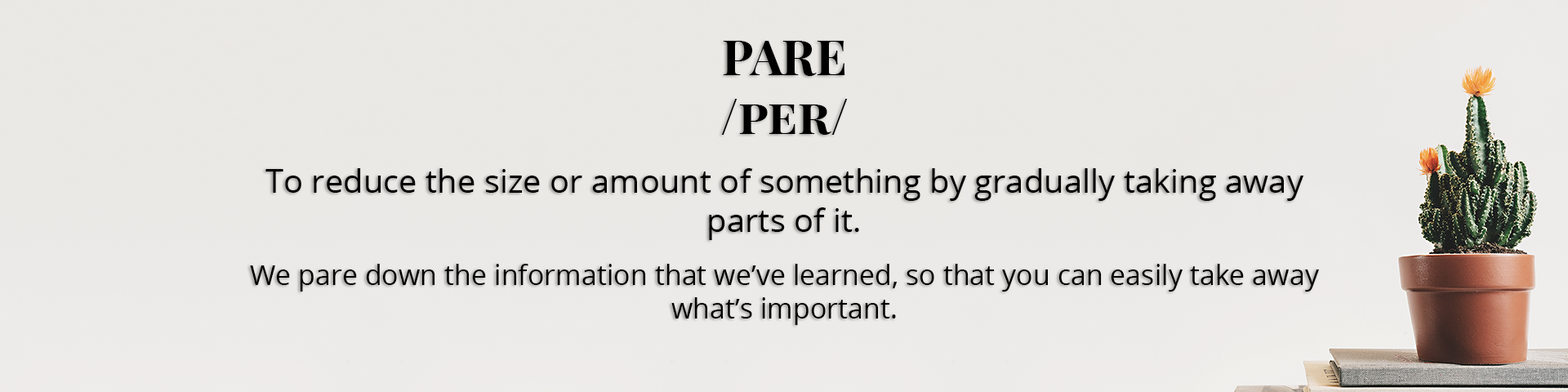
<style>
.page{position:relative;width:1568px;height:392px;background:#eae9e5}
.page>*{position:absolute;margin:0}
.t1{font:27.8px "OpenSans";color:#000000}
.t2{font:49px "PlayfairDisplaySC-Bold";color:#000000}
.t3{font:32.7px "OpenSans";color:#000000}
</style>
<div class="page">
<p class="t1" style="left:250px;top:41px;width:1069px;height:284px;text-align:center"><span class="t2">PARE<br>/per/<br><br></span><span class="t3">To reduce the size or amount of something by gradually taking away parts of it.<br><br></span>We pare down the information that we’ve learned, so that you can easily take away what’s important.</p>
</div>
